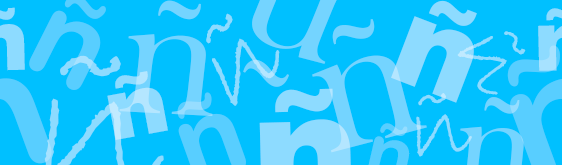
<style>
.page{position:relative;width:562px;height:165px;background:#00c0ff}
.page>*{position:absolute;margin:0}
.t1{font:131.9px "BradleyHandITC";color:#8ddbff;scale:0.91 1}
</style>
<div class="page">
<p class="t1" style="left:206px;top:13px;width:74px;height:93px;rotate:-33deg">ñ</p>
</div>
